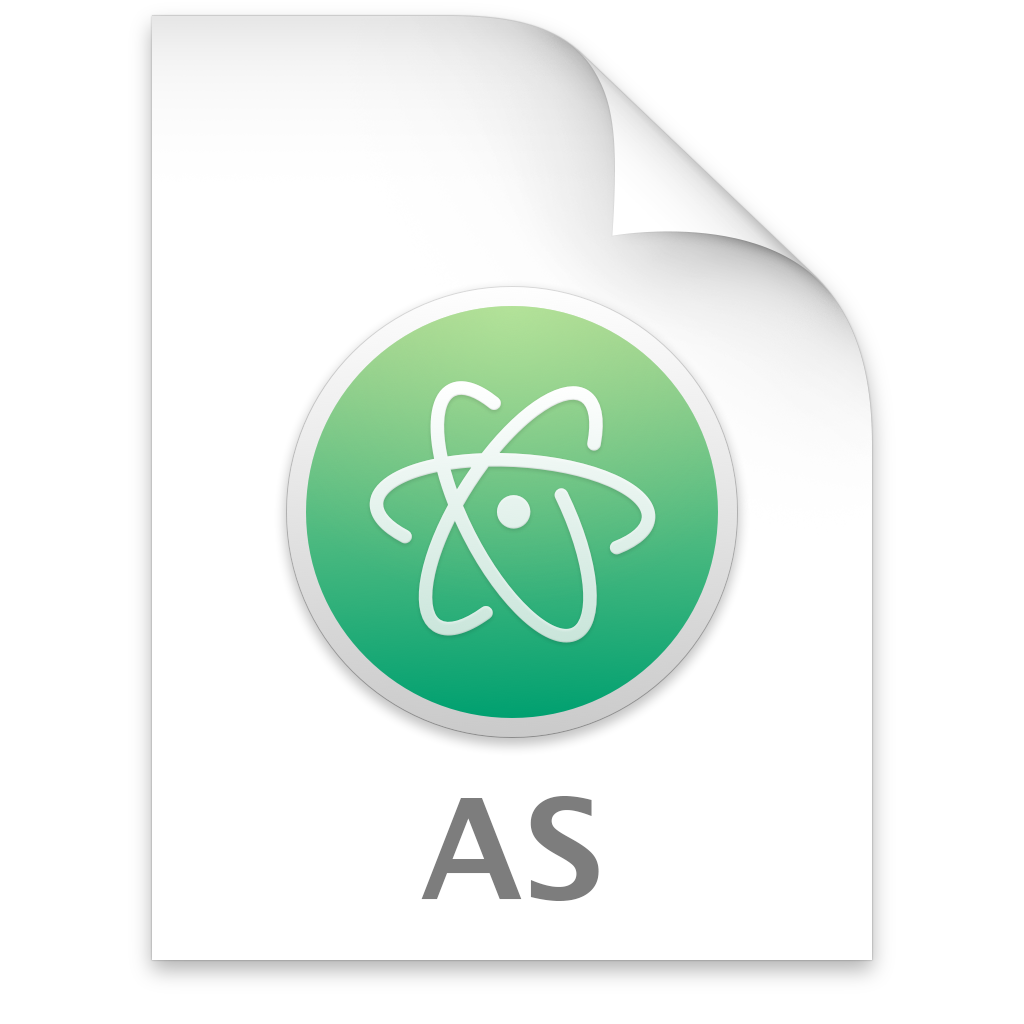
<style>
.page{position:relative;width:1024px;height:1024px;background:#ffffff}
.page>*{position:absolute;margin:0}
.t1{font:140px "LucidaGrande-Bold";color:#7d7d7d}
</style>
<div class="page">
<p class="t1" style="left:421px;top:796px;width:178px;height:105px">AS</p>
</div>
